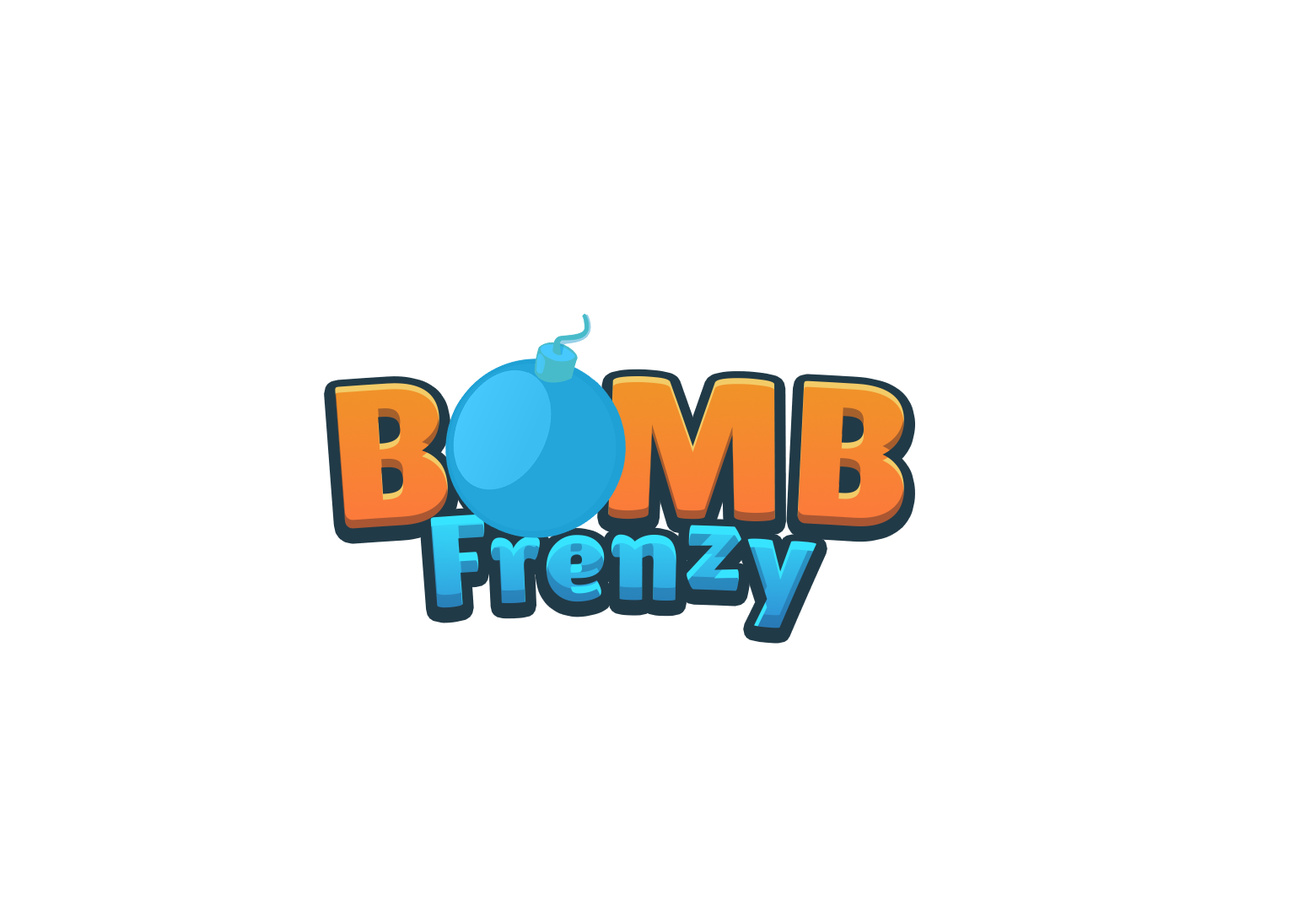
<style>
.page{position:relative;width:1309px;height:911px;background:#ffffff}
.page>*{position:absolute;margin:0}
.t1{font:203.2px "LilitaOne"}
.t2{font:132.1px "LilitaOne"}
</style>
<div class="page">
<p class="t1" style="left:335px;top:375px;width:569px;height:154px">BOMB</p>
<p class="t2" style="left:430px;top:514px;width:386px;height:114px">Frenzy</p>
</div>
